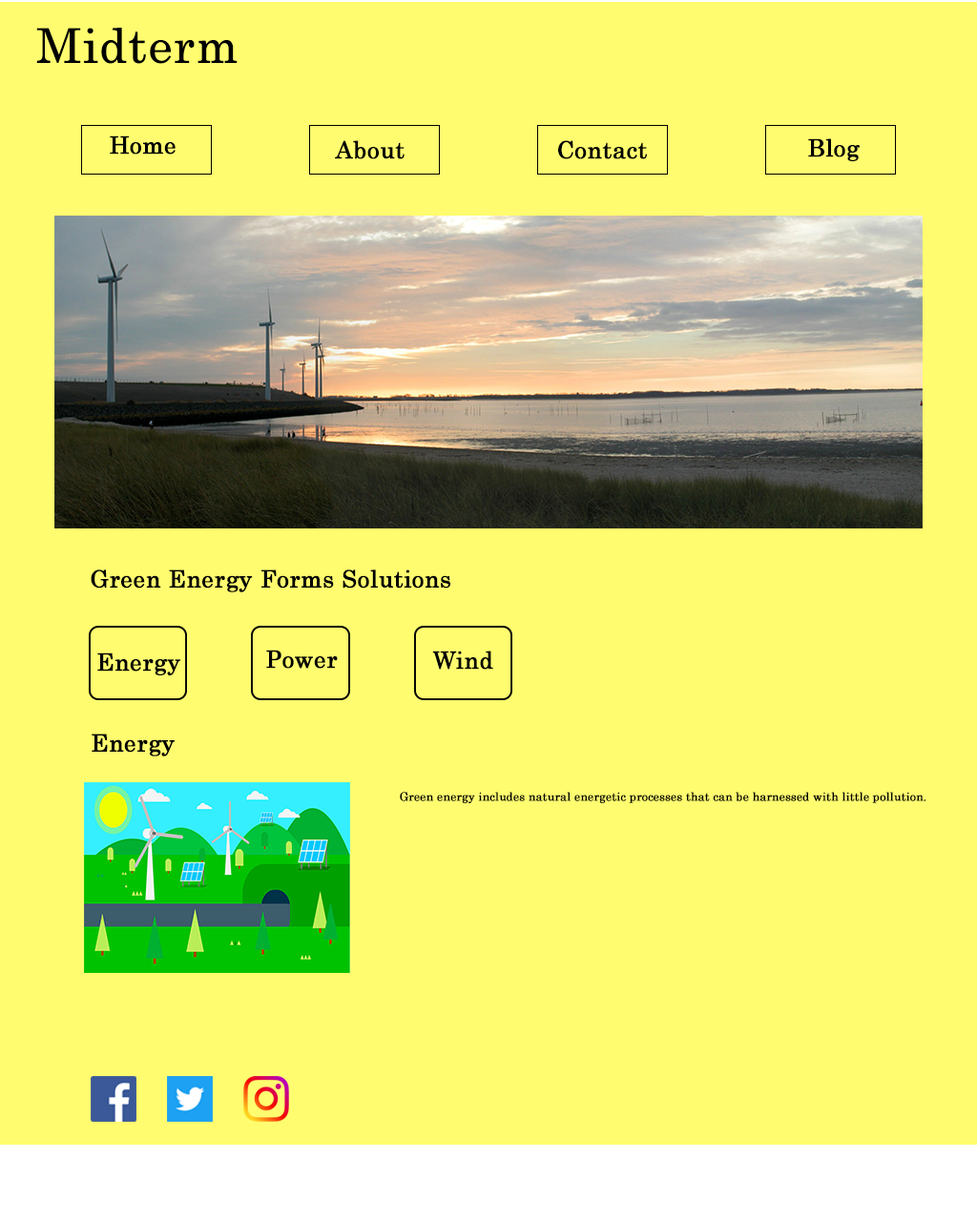
<style>
.page{position:relative;width:977px;height:1221px;background:#fffc70}
.page>*{position:absolute;margin:0}
.t1{font:47.7px "Century";letter-spacing:0.003em;color:#000000;font-weight:bold}
.t2{font:23.8px "Century";letter-spacing:0.003em;color:#000000;font-weight:bold}
.t3{font:11.4px "Century";letter-spacing:0.003em;color:#000000;font-weight:bold}
</style>
<div class="page">
<p class="t1" style="left:36px;top:28px;width:201px;height:36px">Midterm</p>
<p class="t2" style="left:110px;top:135px;width:66px;height:20px">Home</p>
<p class="t2" style="left:335px;top:140px;width:69px;height:19px">About</p>
<p class="t2" style="left:558px;top:140px;width:89px;height:19px">Contact</p>
<p class="t2" style="left:808px;top:138px;width:51px;height:23px">Blog</p>
<p class="t2" style="left:91px;top:569px;width:359px;height:23px">Green Energy Forms Solutions</p>
<p class="t2" style="left:97px;top:652px;width:83px;height:23px">Energy</p>
<p class="t2" style="left:266px;top:650px;width:72px;height:19px">Power</p>
<p class="t2" style="left:432px;top:650px;width:61px;height:20px">Wind</p>
<p class="t2" style="left:92px;top:733px;width:83px;height:23px">Energy</p>
<p class="t3" style="left:400px;top:792px;width:526px;height:11px">Green energy includes natural energetic processes that can be harnessed with little pollution.</p>
</div>
